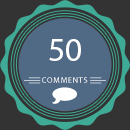
<style>
.page{position:relative;width:130px;height:130px;background:#506a85}
.page>*{position:absolute;margin:0}
.t1{font:33.5px "MyriadPro-Regular";color:#ffffff}
.t2{font:8px "MyriadPro-Regular";letter-spacing:0.1em}
</style>
<div class="page">
<p class="t1" style="left:49px;top:39px;width:32px;height:22px">50</p>
<p class="t2" style="left:42px;top:77px;width:46px;height:6px">COMMENTS</p>
</div>
